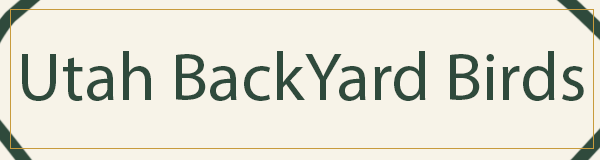
<style>
.page{position:relative;width:600px;height:160px;background:#f7f3e8}
.page>*{position:absolute;margin:0}
.t1{font:68.7px "MyriadPro-Regular";color:#2f4a3c}
</style>
<div class="page">
<p class="t1" style="left:22px;top:51px;width:562px;height:50px">Utah BackYard Birds</p>
</div>
